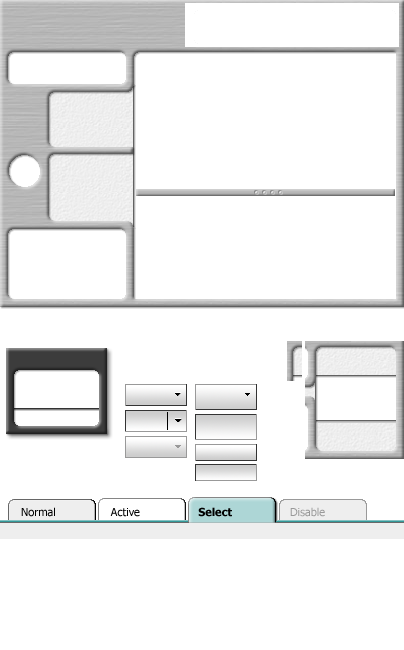
<style>
.page{position:relative;width:404px;height:650px;background:#ffffff}
.page>*{position:absolute;margin:0}
.t1{font:11px "Tahoma";color:#000000}
.t2{font:11px "Tahoma-Bold";color:#000000}
.t3{font:11px "Tahoma";color:#999999}
</style>
<div class="page">
<p class="t1" style="left:21px;top:507px;width:304px;height:10px">Normal                Active                 <span class="t2">Select                 </span><span class="t3">Disable</span></p>
</div>
